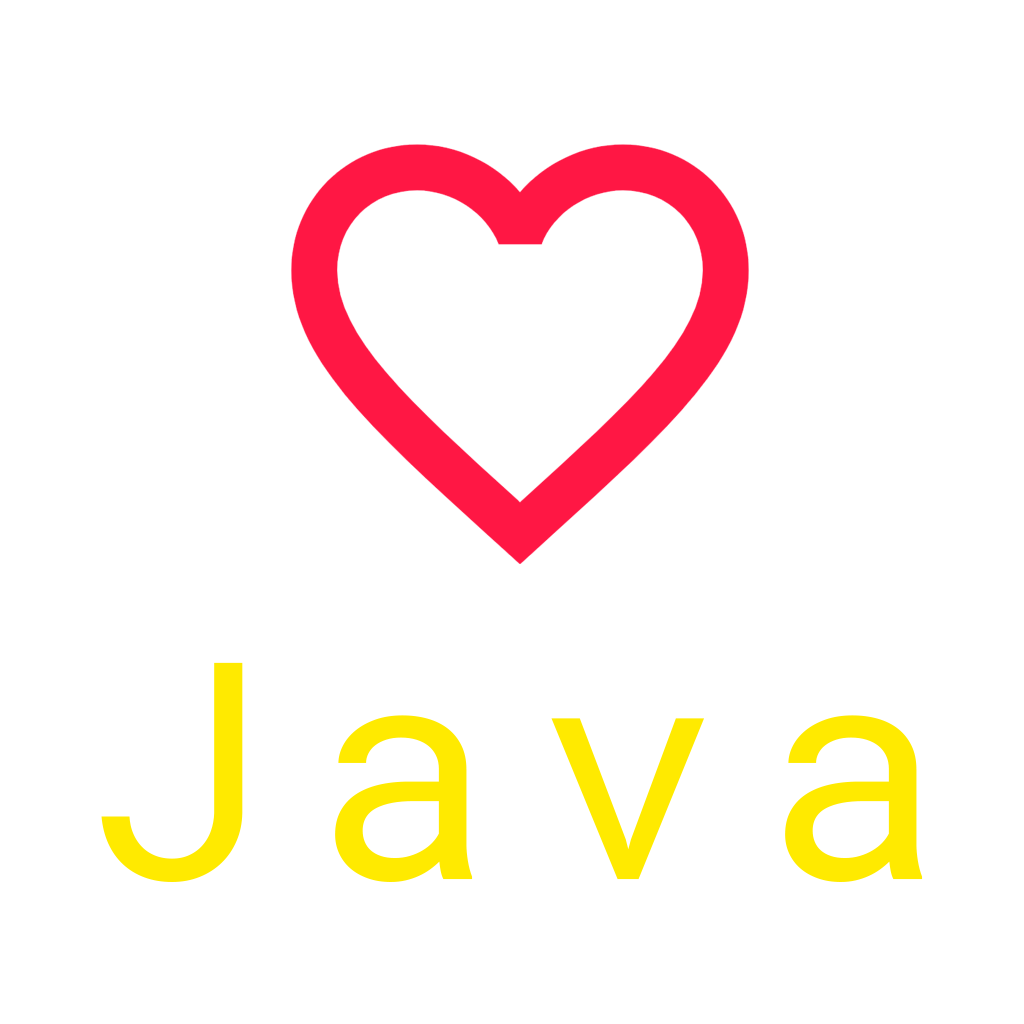
<style>
.page{position:relative;width:1024px;height:1024px;background:#ffffff}
.page>*{position:absolute;margin:0}
.t1{font:303.7px "RobotoMono-Regular";letter-spacing:0.14em;color:#ffea00}
</style>
<div class="page">
<p class="t1" style="left:101px;top:662px;width:822px;height:220px">Java</p>
</div>
